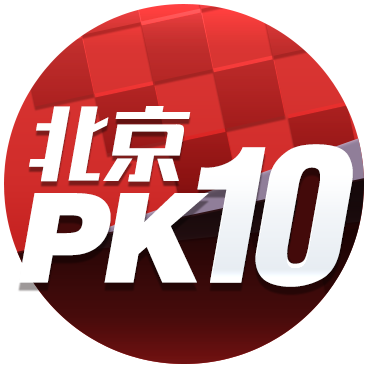
<style>
.page{position:relative;width:368px;height:368px;background:#ffffff}
.page>*{position:absolute;margin:0}
.t1{font:80px "RuixianSunHeiHeavyGB1.0";letter-spacing:-0.025em;color:#ffffff;font-style:italic}
.t2{font:207.4px "Helvetica-Condensed-Black-Se";letter-spacing:-0.1em;color:#f2f5f8;font-style:italic}
.t3{font:124px "Swiss721BT-Black";letter-spacing:-0.05em;color:#ffffff;font-style:italic}
</style>
<div class="page">
<p class="t1" style="left:29px;top:106px;width:162px;height:76px">北京</p>
<p class="t2" style="left:197px;top:144px;width:156px;height:143px">10</p>
<p class="t3" style="left:18px;top:193px;width:191px;height:90px">PK</p>
</div>
